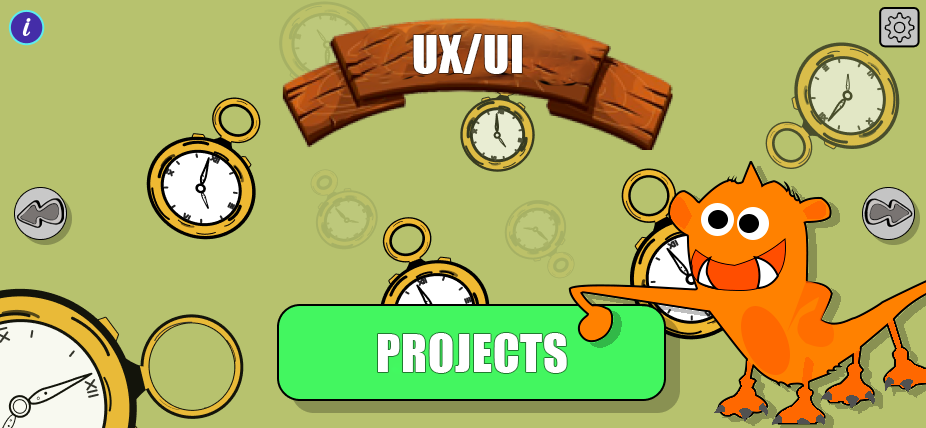
<style>
.page{position:relative;width:926px;height:428px;background:#b7c26e}
.page>*{position:absolute;margin:0}
.t1{font:48px "Impact";letter-spacing:0.02em;color:#ffffff}
</style>
<div class="page">
<p class="t1" style="left:413px;top:34px;width:109px;height:40px">UX/UI</p>
<p class="t1" style="left:378px;top:333px;width:189px;height:40px">PROJECTS</p>
</div>
